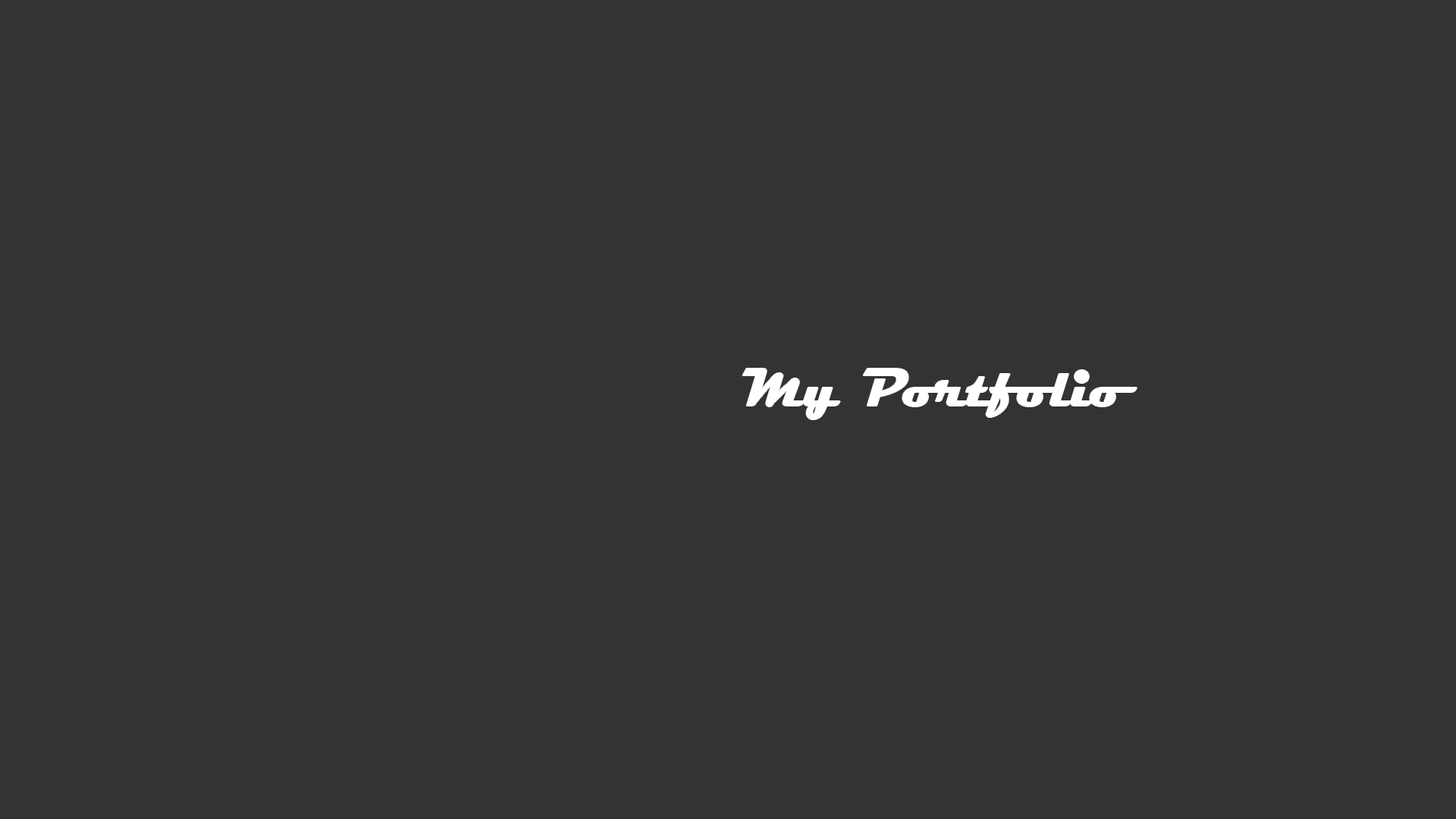
<style>
.page{position:relative;width:1456px;height:819px;background:#333333}
.page>*{position:absolute;margin:0}
.t1{font:54.6px "Magneto-Bold";color:#ffffff}
</style>
<div class="page">
<p class="t1" style="left:742px;top:369px;width:395px;height:50px">My Portfolio</p>
</div>
